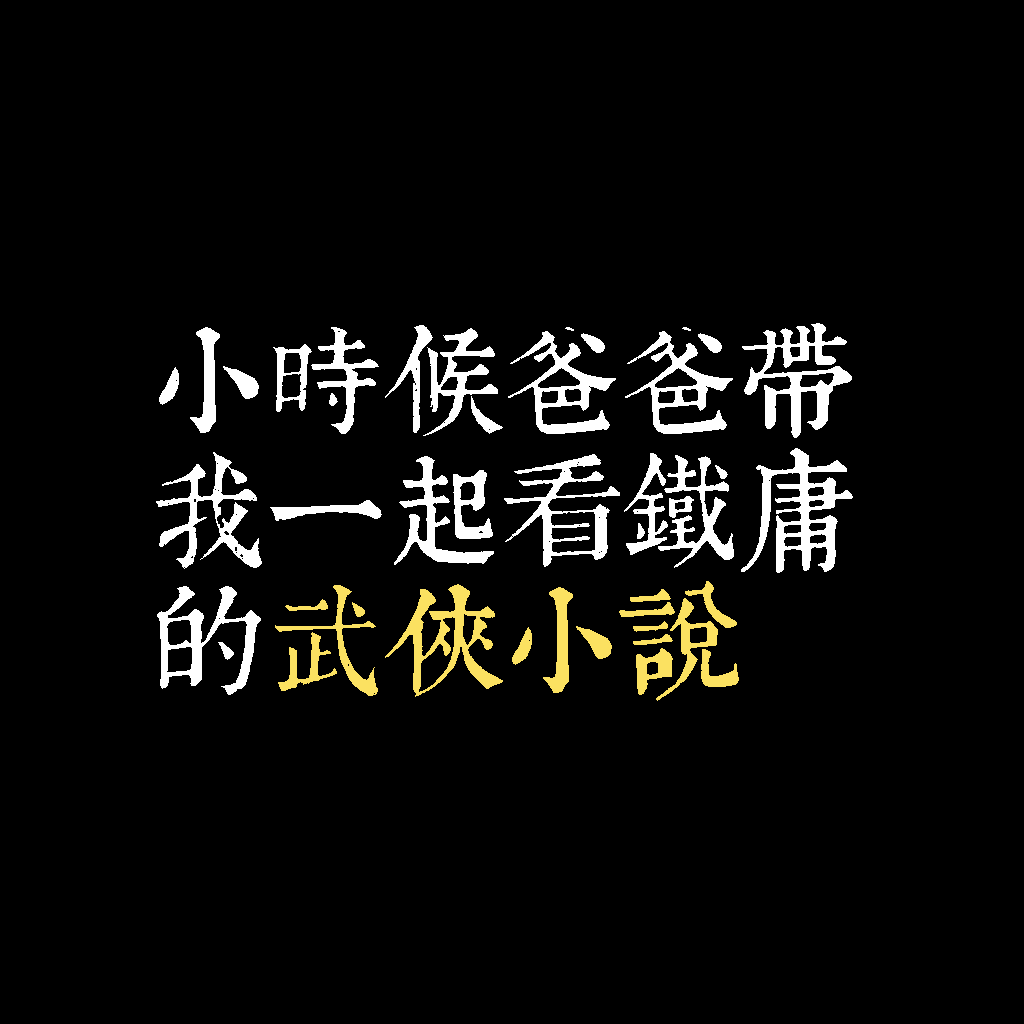
<style>
.page{position:relative;width:1024px;height:1024px;background:#000000}
.page>*{position:absolute;margin:0}
.t1{font:120px/130px "TpldKhangXiDictTrial";letter-spacing:-0.02em;color:#ffffff}
.t2{font:120px/130px "TpldKhangXiDictTrial";letter-spacing:-0.02em;color:#fbe161}
</style>
<div class="page">
<p class="t1" style="left:156px;top:323px;width:697px;height:378px">小時候爸爸帶<br>我一起看鐵庸<br>的<span class="t2">武俠小說</span></p>
</div>
